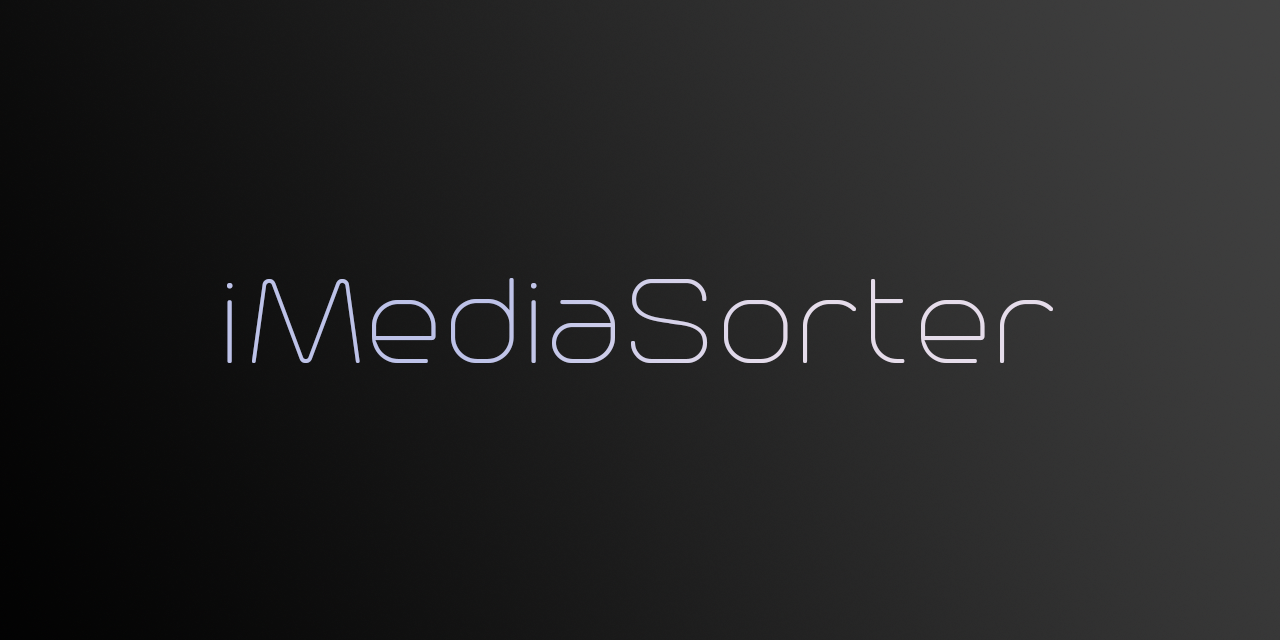
<style>
.page{position:relative;width:1280px;height:640px}
.page>*{position:absolute;margin:0}
.t1{font:150px "Trench-Thin"}
</style>
<div class="page">
<p class="t1" style="left:227px;top:278px;width:826px;height:85px">iMediaSorter</p>
</div>
